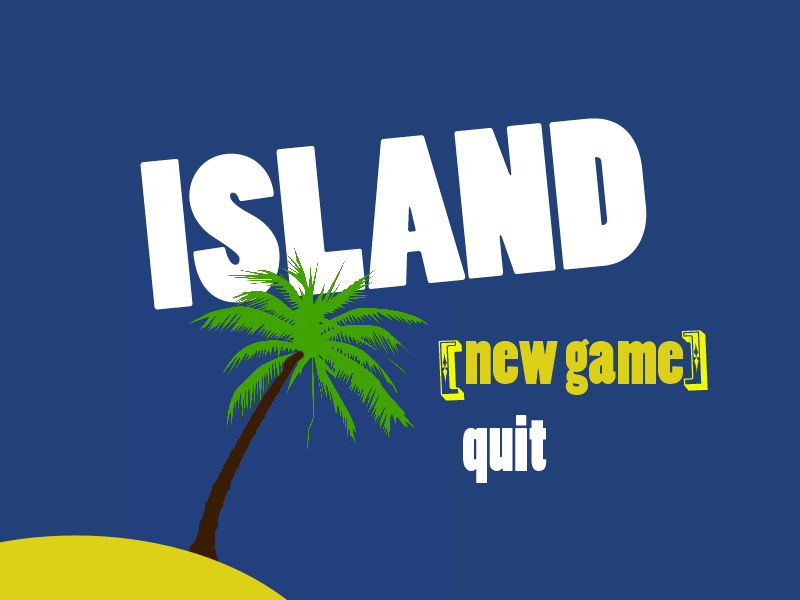
<style>
.page{position:relative;width:800px;height:600px;background:#224179}
.page>*{position:absolute;margin:0}
.t1{font:197px "PoplarStd";letter-spacing:0.001em;color:#ffffff}
.t2{font:72px "RosewoodStd-Regular";letter-spacing:0.001em;color:#f6ff00}
.t3{font:72px "PoplarStd";letter-spacing:0.001em;color:#ddd117}
.t4{font:72px "PoplarStd";letter-spacing:0.001em;color:#ffffff}
</style>
<div class="page">
<p class="t1" style="left:140px;top:118px;width:507px;height:192px;rotate:-6deg">ISLAND</p>
<p class="t2" style="left:438px;top:330px;width:270px;height:71px;rotate:-2deg">[                ]</p>
<p class="t3" style="left:466px;top:339px;width:217px;height:56px">new game</p>
<p class="t4" style="left:463px;top:415px;width:84px;height:68px">quit</p>
</div>
